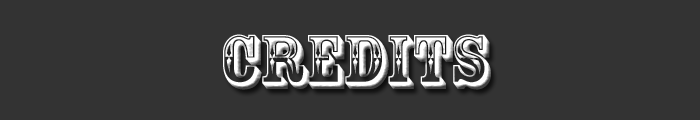
<style>
.page{position:relative;width:700px;height:120px;background:#333333}
.page>*{position:absolute;margin:0}
.t1{font:72px "RosewoodStd-Regular"}
</style>
<div class="page">
<p class="t1" style="left:223px;top:34px;width:268px;height:56px">credits</p>
</div>
